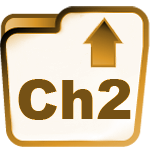
<style>
.page{position:relative;width:150px;height:150px;background:#fcf7f0}
.page>*{position:absolute;margin:0}
.t1{font:55px "Arial-Black";color:#755115}
</style>
<div class="page">
<p class="t1" style="left:18px;top:79px;width:113px;height:41px">Ch2</p>
</div>
